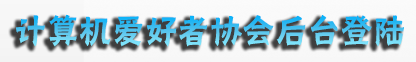
<style>
.page{position:relative;width:416px;height:62px}
.page>*{position:absolute;margin:0}
.t1{font:32px "FZYHJW--GB1-0";letter-spacing:0.02em}
</style>
<div class="page">
<p class="t1" style="left:16px;top:14px;width:388px;height:33px">计算机爱好者协会后台登陆</p>
</div>
